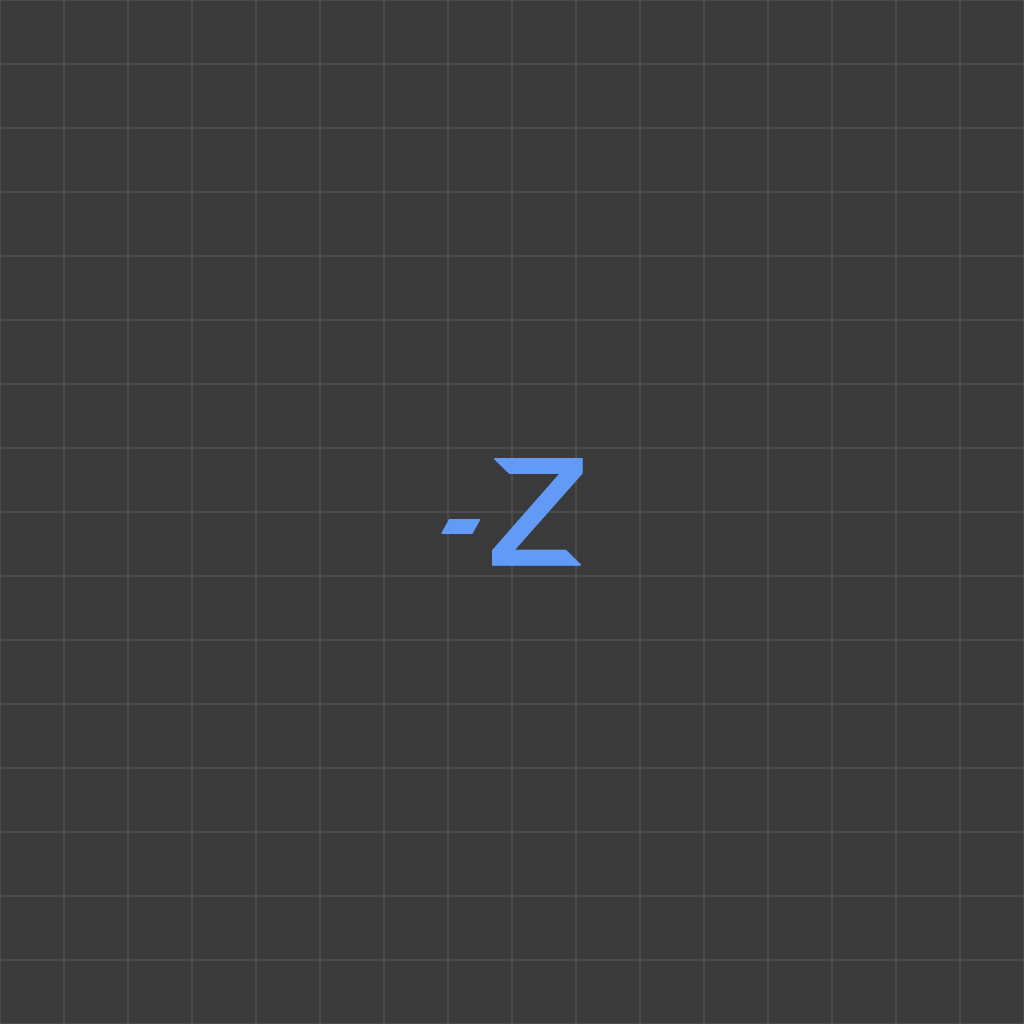
<style>
.page{position:relative;width:1024px;height:1024px;background:#3a3a3a}
.page>*{position:absolute;margin:0}
.t1{font:150px "SpaceEngineers";font-weight:bold}
.t2{font:150px "SpaceEngineers";color:#629bf7;font-weight:bold}
</style>
<div class="page">
<p class="t1" style="left:441px;top:457px;width:142px;height:110px">-X</p>
<p class="t2" style="left:441px;top:458px;width:142px;height:108px">-Z</p>
</div>
